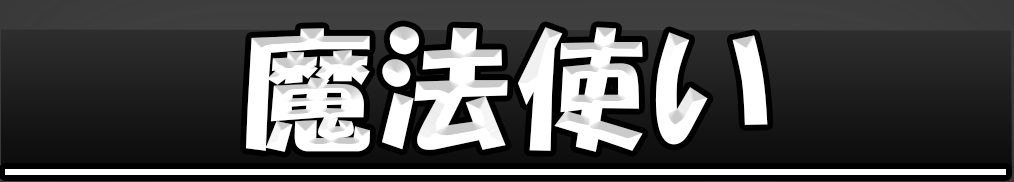
<style>
.page{position:relative;width:1014px;height:182px}
.page>*{position:absolute;margin:0}
.t1{font:130.2px "HGPSoeiKakupoptai";letter-spacing:0.05em;color:#ffffff}
</style>
<div class="page">
<p class="t1" style="left:246px;top:26px;width:522px;height:126px">魔法使い</p>
</div>
